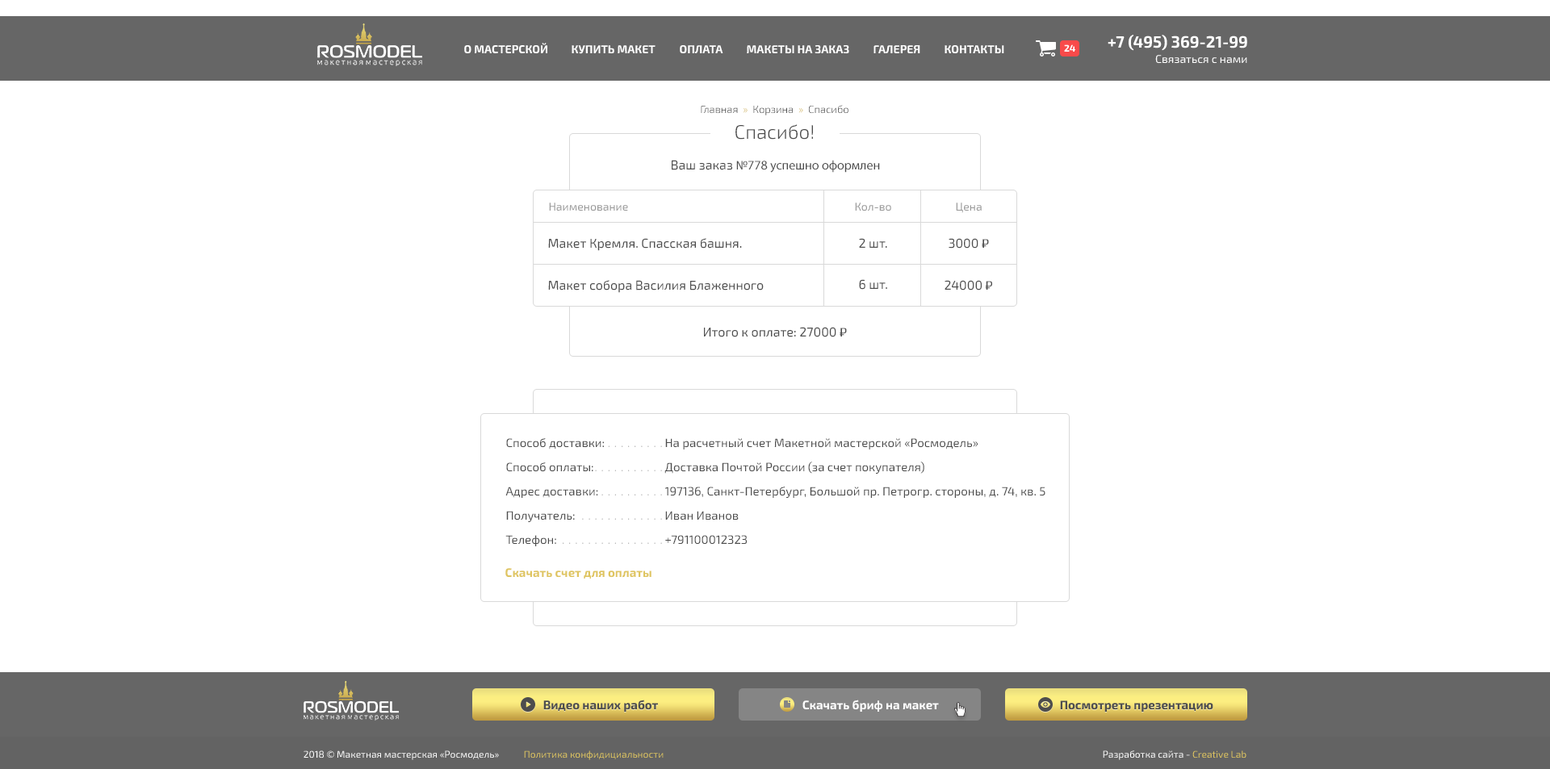
<style>
.page{position:relative;width:1550px;height:769px;background:#ffffff}
.page>*{position:absolute;margin:0}
.t1{font:10.5px "Exo2-Light";color:#4d4d4d}
.t2{font:10.5px "Exo2-Light";color:#d1b558}
.t3{font:19.4px "Exo2-Light";color:#4d4d4d}
.t4{font:12.9px "MyriadPro-Regular";color:#4d4d4d}
.t5{font:12.9px "Exo2-Regular";color:#4d4d4d}
.t6{font:11.3px "Exo2-Regular";color:#999999}
.t7{font:12.9px "Play-Regular";color:#4d4d4d}
.t8{font:12.1px/24.2px "Exo2-Regular";color:#4d4d4d}
.t9{font:12.1px "Exo2-Bold";color:#dfc560}
</style>
<div class="page">
<p class="t1" style="left:701px;top:105px;width:147px;height:10px">Главная  <span class="t2">»</span>  Корзина  <span class="t2">»</span>  Спасибо</p>
<p class="t3" style="left:735px;top:124px;width:78px;height:16px">Спасибо!</p>
<p class="t4" style="left:672px;top:160px;width:208px;height:13px"><span class="t5">Ваш заказ </span>№778 успешно оформлен</p>
<p class="t6" style="left:549px;top:203px;width:79px;height:9px">Наименование</p>
<p class="t6" style="left:855px;top:203px;width:36px;height:9px">Кол-во</p>
<p class="t6" style="left:956px;top:203px;width:26px;height:10px">Цена</p>
<p class="t5" style="left:548px;top:238px;width:194px;height:13px">Макет Кремля. Спасская башня.</p>
<p class="t5" style="left:859px;top:238px;width:28px;height:10px">2 шт.</p>
<p class="t5" style="left:949px;top:238px;width:40px;height:11px">3000 <span class="t7">₽</span></p>
<p class="t5" style="left:548px;top:280px;width:216px;height:13px">Макет собора Василия Блаженного</p>
<p class="t5" style="left:859px;top:279px;width:28px;height:11px">6 шт.</p>
<p class="t5" style="left:945px;top:280px;width:47px;height:11px">24000 <span class="t7">₽</span></p>
<p class="t5" style="left:704px;top:327px;width:143px;height:10px">Итого к оплате: 27000 <span class="t7">₽</span></p>
<p class="t8" style="left:505px;top:438px;width:99px;height:109px">Способ доставки:<br>Способ оплаты:<br>Адрес доставки:<br>Получатель:<br>Телефон:</p>
<p class="t8" style="left:664px;top:438px;width:381px;height:107px">На расчетный счет Макетной мастерской «Росмодель»<br>Доставка Почтой России (за счет покупателя)<br>197136, Санкт-Петербург, Большой пр. Петрогр. стороны, д. 74, кв. 5<br>Иван Иванов<br>+791100012323</p>
<p class="t9" style="left:505px;top:568px;width:146px;height:11px">Скачать счет для оплаты</p>
</div>
